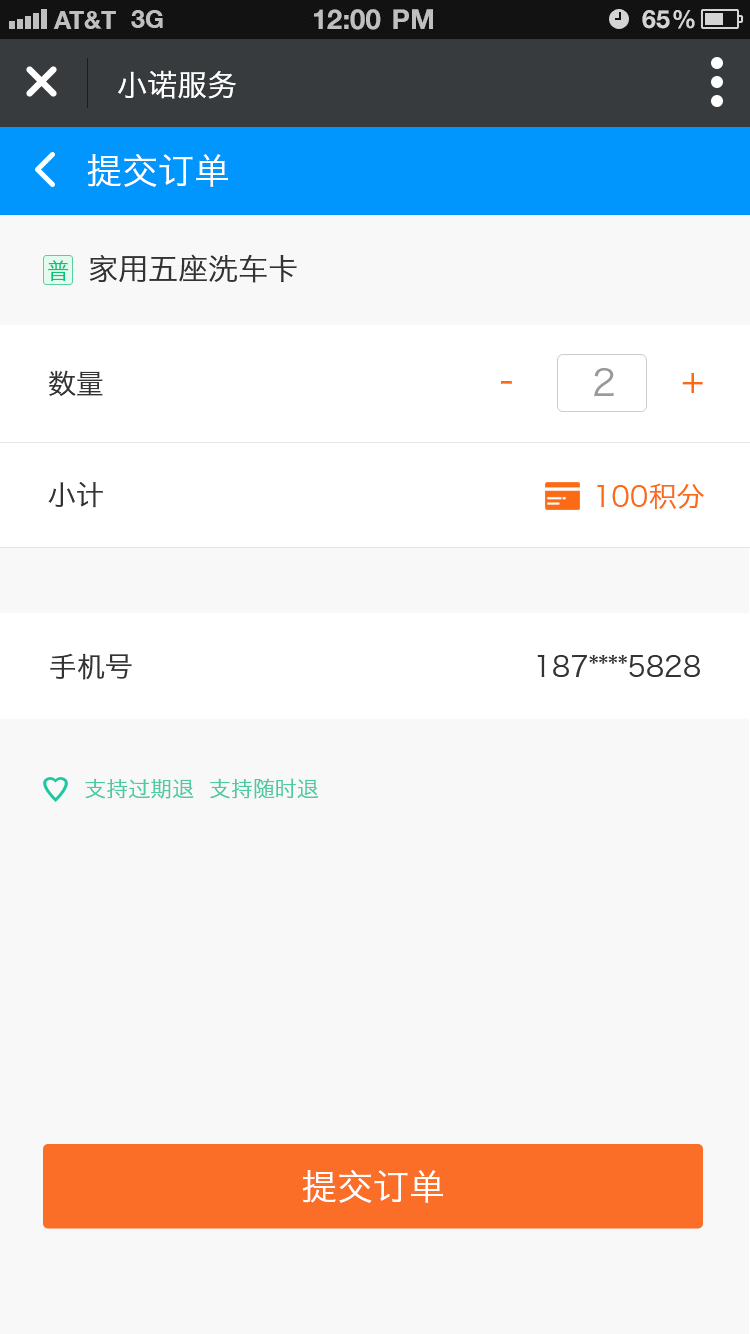
<style>
.page{position:relative;width:750px;height:1334px;background:#f8f8f8}
.page>*{position:absolute;margin:0}
.t1{font:30px "HiraginoSansGB-W3";color:#ffffff}
.t2{font:36px "HiraginoSansGB-W3";color:#ffffff}
.t3{font:30px "HiraginoSansGB-W3";color:#333333}
.t4{font:22px "HiraginoSansGB-W3";color:#07c279}
.t5{font:28px "HiraginoSansGB-W3";color:#333333}
.t6{font:36px "HiraginoSansGB-W3";color:#fb6b15}
.t7{font:36px "HiraginoSansGB-W3";color:#999999}
.t8{font:28px "HiraginoSansGB-W3";color:#fb6b15}
.t9{font:22px "HiraginoSansGB-W3";color:#4ecaa3}
</style>
<div class="page">
<p class="t1" style="left:118px;top:70px;width:118px;height:29px">小诺服务</p>
<p class="t2" style="left:87px;top:154px;width:141px;height:33px">提交订单</p>
<p class="t3" style="left:89px;top:254px;width:208px;height:29px">家用五座洗车卡</p>
<p class="t4" style="left:48px;top:260px;width:20px;height:21px">普</p>
<p class="t5" style="left:49px;top:370px;width:54px;height:26px">数量</p>
<p class="t6" style="left:501px;top:373px;width:202px;height:20px">-              +</p>
<p class="t7" style="left:594px;top:368px;width:20px;height:29px">2</p>
<p class="t5" style="left:48px;top:482px;width:55px;height:26px">小计</p>
<p class="t8" style="left:597px;top:483px;width:107px;height:27px">100积分</p>
<p class="t5" style="left:50px;top:653px;width:650px;height:27px">手机号                                           187****5828</p>
<p class="t9" style="left:85px;top:778px;width:234px;height:21px">支持过期退  支持随时退</p>
<p class="t2" style="left:302px;top:1170px;width:141px;height:33px">提交订单</p>
</div>
